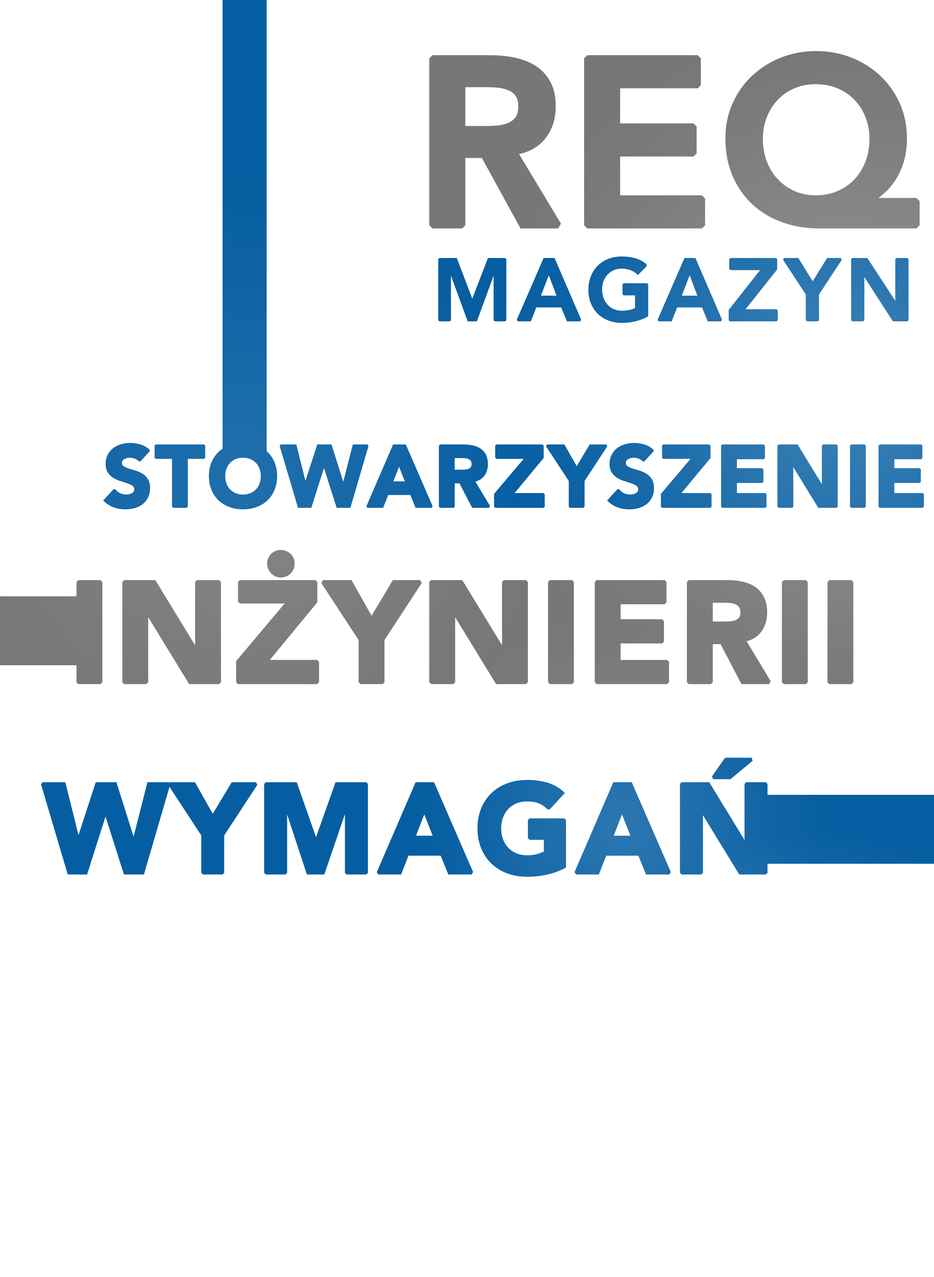
<style>
.page{position:relative;width:934px;height:1277px;background:#ffffff}
.page>*{position:absolute;margin:0}
.t1{font:235.4px "Avenir-Heavy";color:#777777;text-transform:uppercase;font-weight:bold}
.t2{font:86.3px "Avenir-Heavy";color:#1d6dab;text-transform:uppercase;font-weight:bold}
.t3{font:86.3px "Avenir-Black";color:#065ea2;text-transform:uppercase;font-weight:bold}
.t4{font:141.2px "Avenir-Black";color:#777777;text-transform:uppercase;font-weight:bold}
.t5{font:125.5px "Avenir-Black";color:#065ea2;text-transform:uppercase;font-weight:bold}
</style>
<div class="page">
<p class="t1" style="left:429px;top:51px;width:491px;height:178px">Req</p>
<p class="t2" style="left:438px;top:256px;width:471px;height:67px">magazyn</p>
<p class="t3" style="left:103px;top:443px;width:821px;height:67px">Stowarzyszenie</p>
<p class="t4" style="left:76px;top:549px;width:777px;height:135px">Inżynierii</p>
<p class="t5" style="left:41px;top:757px;width:727px;height:120px">Wymagań</p>
</div>
